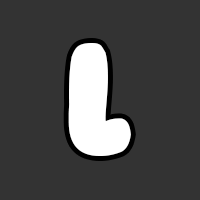
<style>
.page{position:relative;width:200px;height:200px;background:#333333}
.page>*{position:absolute;margin:0}
.t1{font:150px "BubbleGum";color:#ffffff}
</style>
<div class="page">
<p class="t1" style="left:68px;top:43px;width:63px;height:113px">l</p>
</div>
